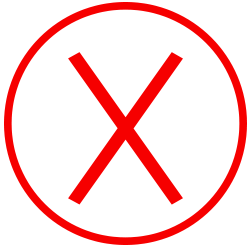
<style>
.page{position:relative;width:251px;height:249px;background:#ffffff}
.page>*{position:absolute;margin:0}
.t1{font:200px "GDT_IV50";color:#f60000}
</style>
<div class="page">
<p class="t1" style="left:68px;top:52px;width:115px;height:153px">X</p>
</div>
